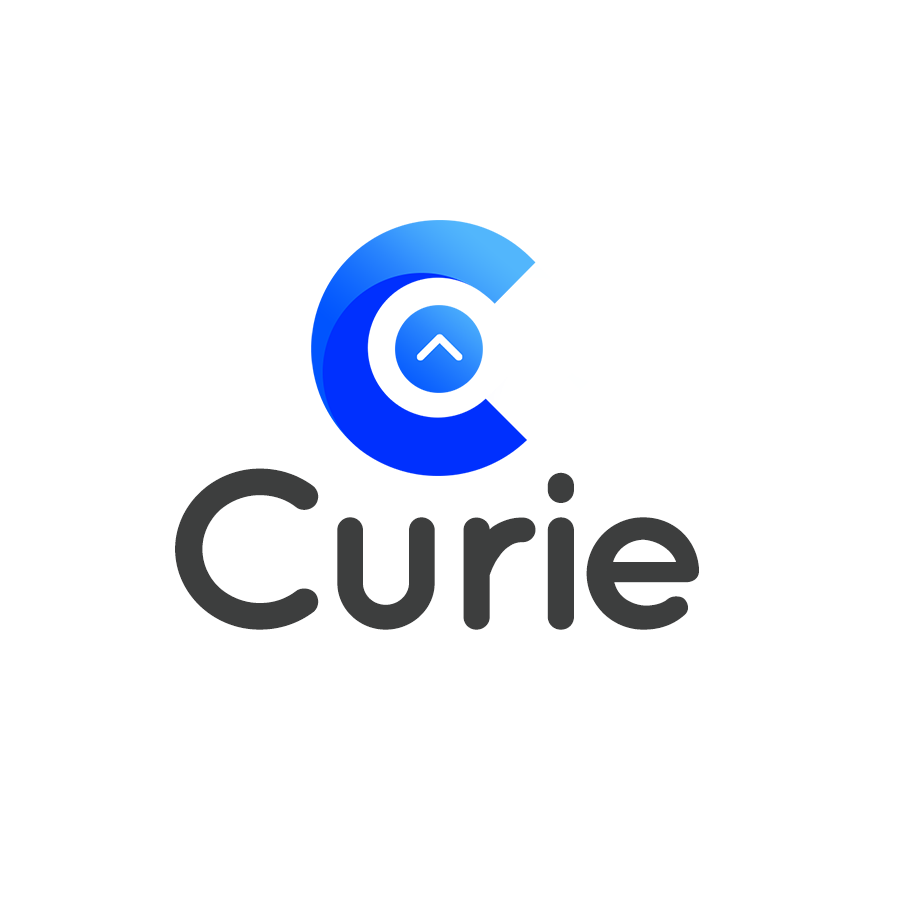
<style>
.page{position:relative;width:900px;height:900px;background:#ffffff}
.page>*{position:absolute;margin:0}
.t1{font:222.1px "QuicksandBold-Regular";letter-spacing:-0.1em;color:#3d3e3e;font-weight:bold;scale:1.03 1}
</style>
<div class="page">
<p class="t1" style="left:175px;top:468px;width:524px;height:162px">Curie</p>
</div>
